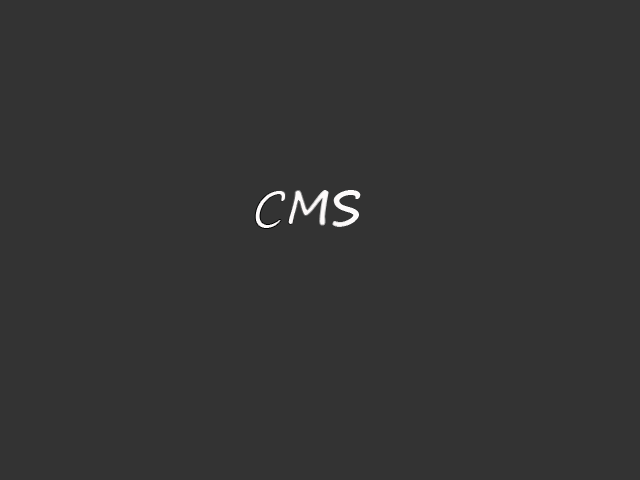
<style>
.page{position:relative;width:640px;height:480px;background:#333333}
.page>*{position:absolute;margin:0}
.t1{font:48px "SegoeScript-Bold";color:#fdfafa}
</style>
<div class="page">
<p class="t1" style="left:254px;top:190px;width:107px;height:39px">CMS</p>
</div>
